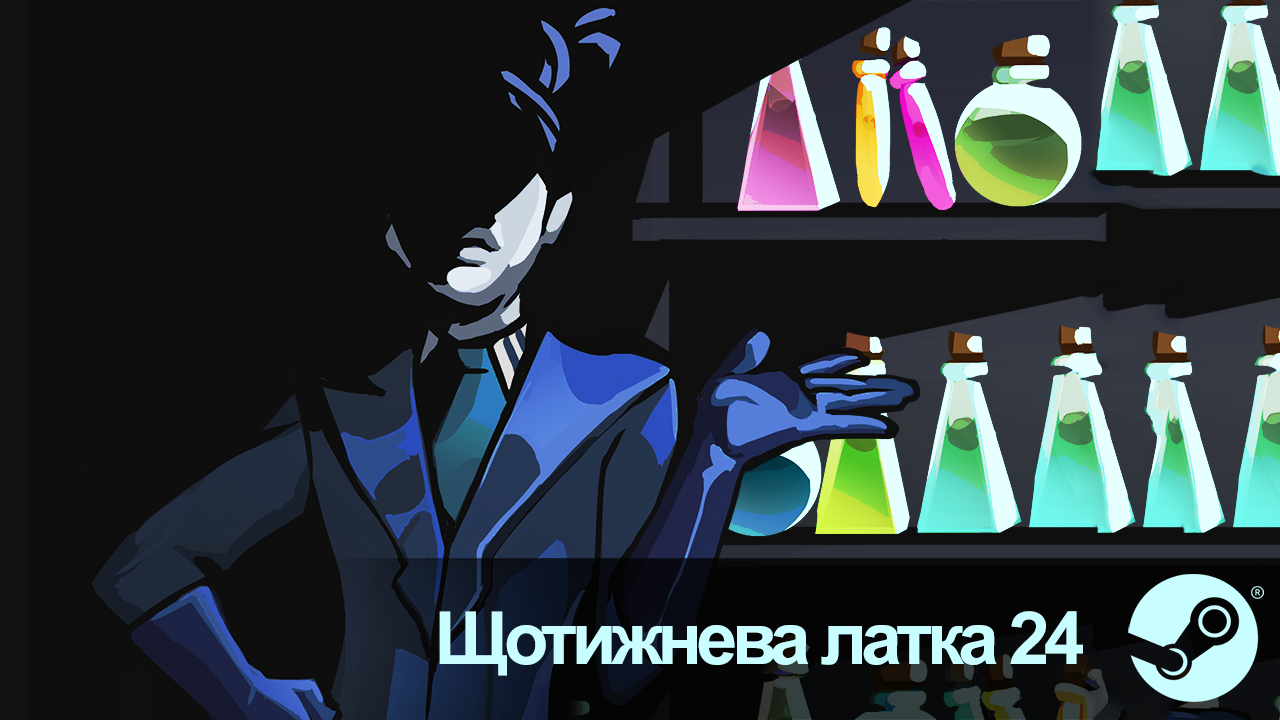
<style>
.page{position:relative;width:1280px;height:720px;background:#0e0e0e}
.page>*{position:absolute;margin:0}
.t1{font:73.3px "Arial-BoldMT";letter-spacing:-0.075em;color:#c8feff}
</style>
<div class="page">
<p class="t1" style="left:439px;top:611px;width:644px;height:65px">Щотижнева латка 24</p>
</div>
